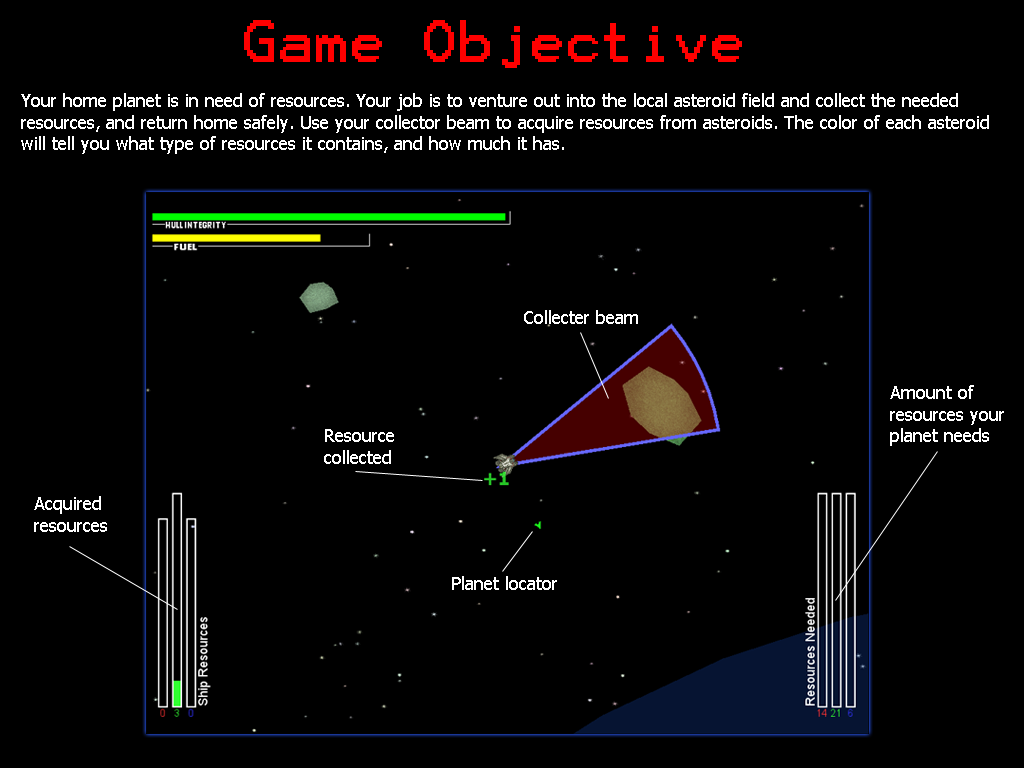
<style>
.page{position:relative;width:1024px;height:768px;background:#000000}
.page>*{position:absolute;margin:0}
.t1{font:48px "Terminal";color:#ff0000}
.t2{font:18px "Tahoma";color:#ffffff}
</style>
<div class="page">
<p class="t1" style="left:244px;top:20px;width:498px;height:48px">Game Objective</p>
<p class="t2" style="left:21px;top:93px;width:968px;height:61px">Your home planet is in need of resources. Your job is to venture out into the local asteroid field and collect the needed<br>resources, and return home safely. Use your collector beam to acquire resources from asteroids. The color of each asteroid<br>will tell you what type of resources it contains, and how much it has.</p>
<p class="t2" style="left:524px;top:310px;width:114px;height:14px">Collecter beam</p>
<p class="t2" style="left:890px;top:385px;width:114px;height:61px">Amount of<br>resources your<br>planet needs</p>
<p class="t2" style="left:324px;top:429px;width:70px;height:35px">Resource<br>collected</p>
<p class="t2" style="left:34px;top:496px;width:73px;height:36px">Acquired<br>resources</p>
<p class="t2" style="left:452px;top:576px;width:105px;height:14px">Planet locator</p>
</div>
